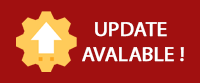
<style>
.page{position:relative;width:200px;height:83px;background:#a11010}
.page>*{position:absolute;margin:0}
.t1{font:20.8px "MyriadPro-Regular";color:#ffffff;font-weight:bold}
</style>
<div class="page">
<p class="t1" style="left:82px;top:22px;width:102px;height:40px;text-align:center">UPDATE <br>AVALABLE !</p>
</div>
